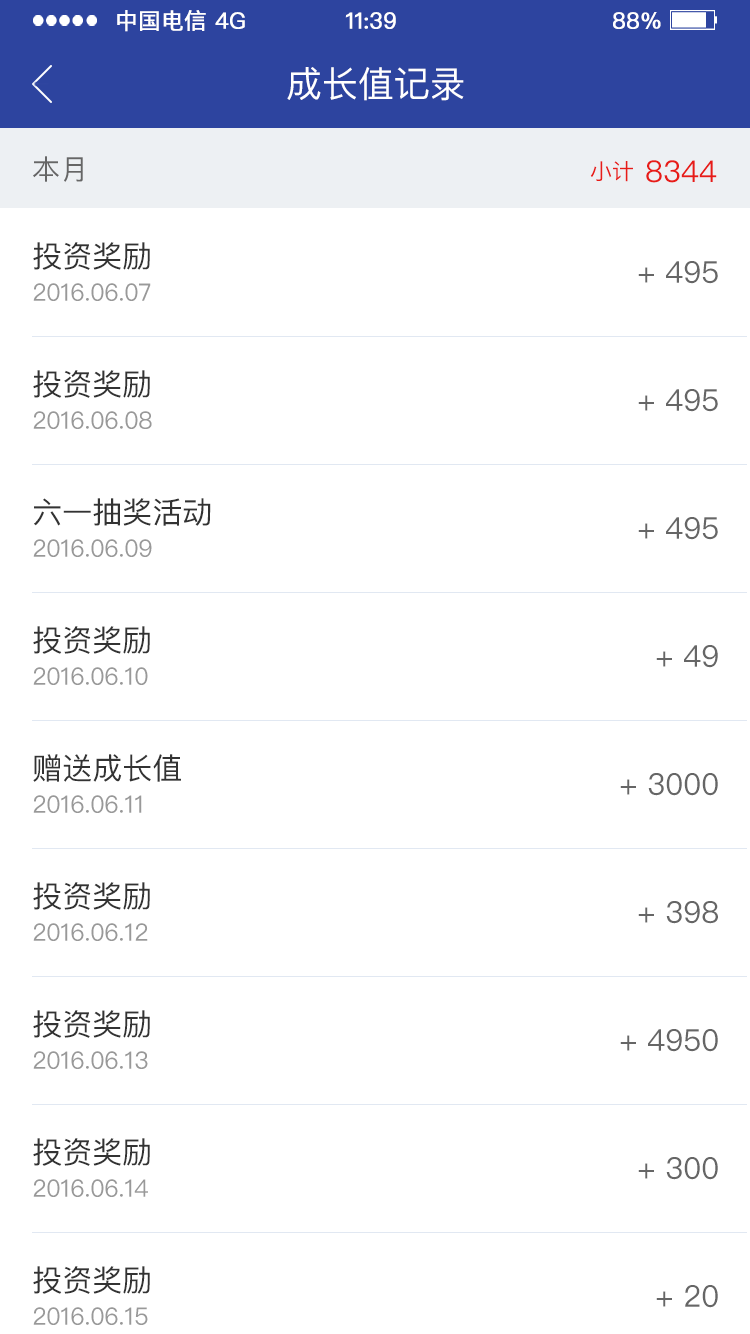
<style>
.page{position:relative;width:750px;height:1334px;background:#ffffff}
.page>*{position:absolute;margin:0}
.t1{font:22.5px "PingFangSC-Regular";color:#ffffff;text-transform:uppercase;font-weight:bold}
.t2{font:36px "PingFangSC-Regular";color:#ffffff;text-transform:uppercase}
.t3{font:28px "PingFangSC-Regular";color:#666666;text-transform:uppercase}
.t4{font:22px "PingFangSC-Regular";color:#e71c18;text-transform:uppercase}
.t5{font:30px "PingFangSC-Regular";color:#e71c18;text-transform:uppercase}
.t6{font:30px/128px "PingFangSC-Regular";color:#333333;text-transform:uppercase}
.t7{font:30px/128px "PingFangSC-Regular";color:#666666;text-transform:uppercase}
</style>
<div class="page">
<p class="t1" style="left:117px;top:10px;width:89px;height:22px">中国电信</p>
<p class="t1" style="left:215px;top:12px;width:30px;height:17px">4G</p>
<p class="t1" style="left:345px;top:12px;width:51px;height:17px">11:39</p>
<p class="t1" style="left:613px;top:12px;width:48px;height:17px">88%</p>
<p class="t2" style="left:287px;top:67px;width:177px;height:34px">成长值记录</p>
<p class="t3" style="left:33px;top:156px;width:50px;height:26px">本月</p>
<p class="t4" style="left:590px;top:161px;width:43px;height:21px">小计</p>
<p class="t5" style="left:646px;top:160px;width:71px;height:23px">8344</p>
<p class="t6" style="left:33px;top:242px;width:178px;height:1052px">投资奖励<br>投资奖励<br>六一抽奖活动<br>投资奖励<br>赠送成长值<br>投资奖励<br>投资奖励<br>投资奖励<br>投资奖励</p>
<p class="t7" style="left:620px;top:261px;width:98px;height:1047px;text-align:right">+ 495<br>+ 495<br>+ 495<br>+ 49<br>+ 3000<br>+ 398<br>+ 4950<br>+ 300<br>+ 20</p>
</div>
